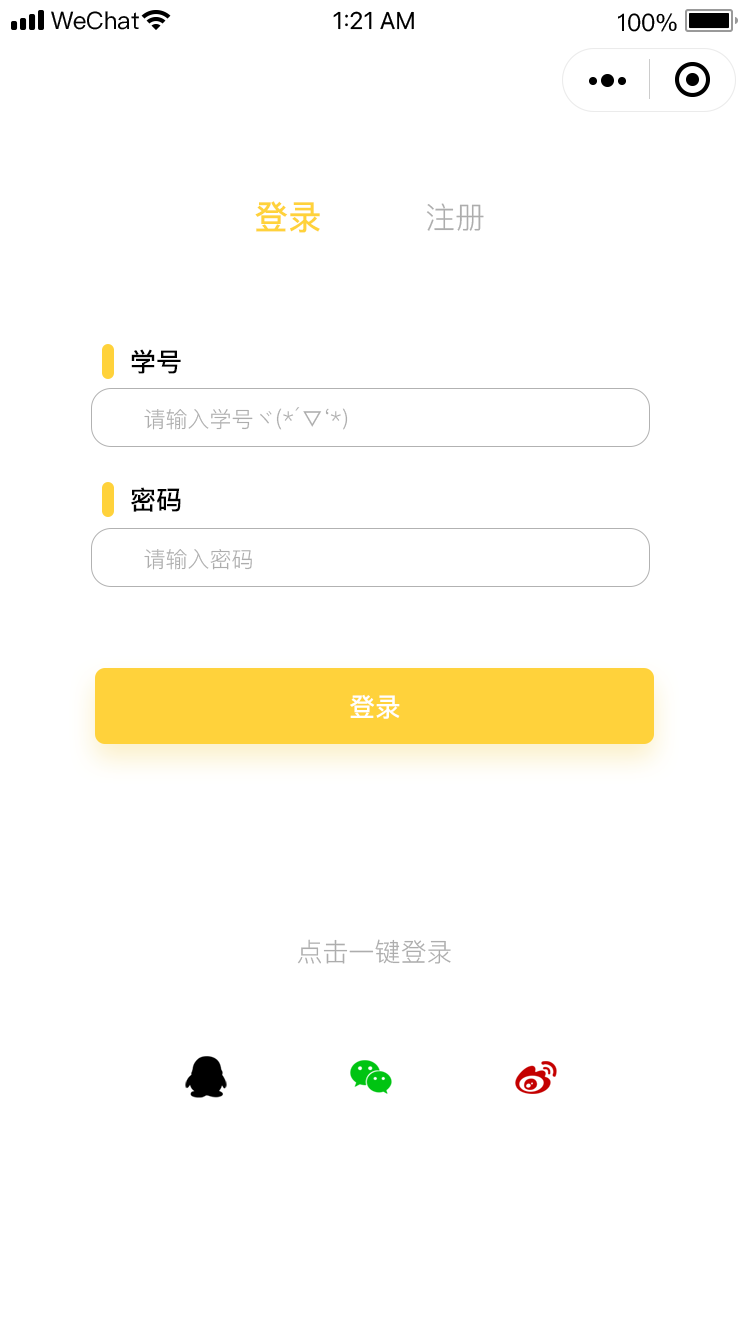
<style>
.page{position:relative;width:750px;height:1334px;background:#ffffff}
.page>*{position:absolute;margin:0}
.t1{font:34px "PingFang-SC-Bold";color:#ffd23b}
.t2{font:30px "PingFang-SC-Regular";color:#adadad}
.t3{font:26px "PingFang-SC-Bold";color:#000000}
.t4{font:22px "PingFang-SC-Regular";color:#adadad}
.t5{font:26px "PingFang-SC-Bold";color:#ffffff}
.t6{font:26px "PingFang-SC-Regular";color:#adadad}
</style>
<div class="page">
<p class="t1" style="left:255px;top:201px;width:65px;height:32px">登录</p>
<p class="t2" style="left:426px;top:203px;width:58px;height:28px">注册</p>
<p class="t3" style="left:131px;top:349px;width:50px;height:25px">学号</p>
<p class="t4" style="left:144px;top:407px;width:204px;height:23px">请输入学号ヾ(*´▽‘*)</p>
<p class="t3" style="left:131px;top:487px;width:50px;height:25px">密码</p>
<p class="t4" style="left:144px;top:549px;width:108px;height:21px">请输入密码</p>
<p class="t5" style="left:350px;top:694px;width:50px;height:25px">登录</p>
<p class="t6" style="left:297px;top:939px;width:154px;height:25px">点击一键登录</p>
</div>
